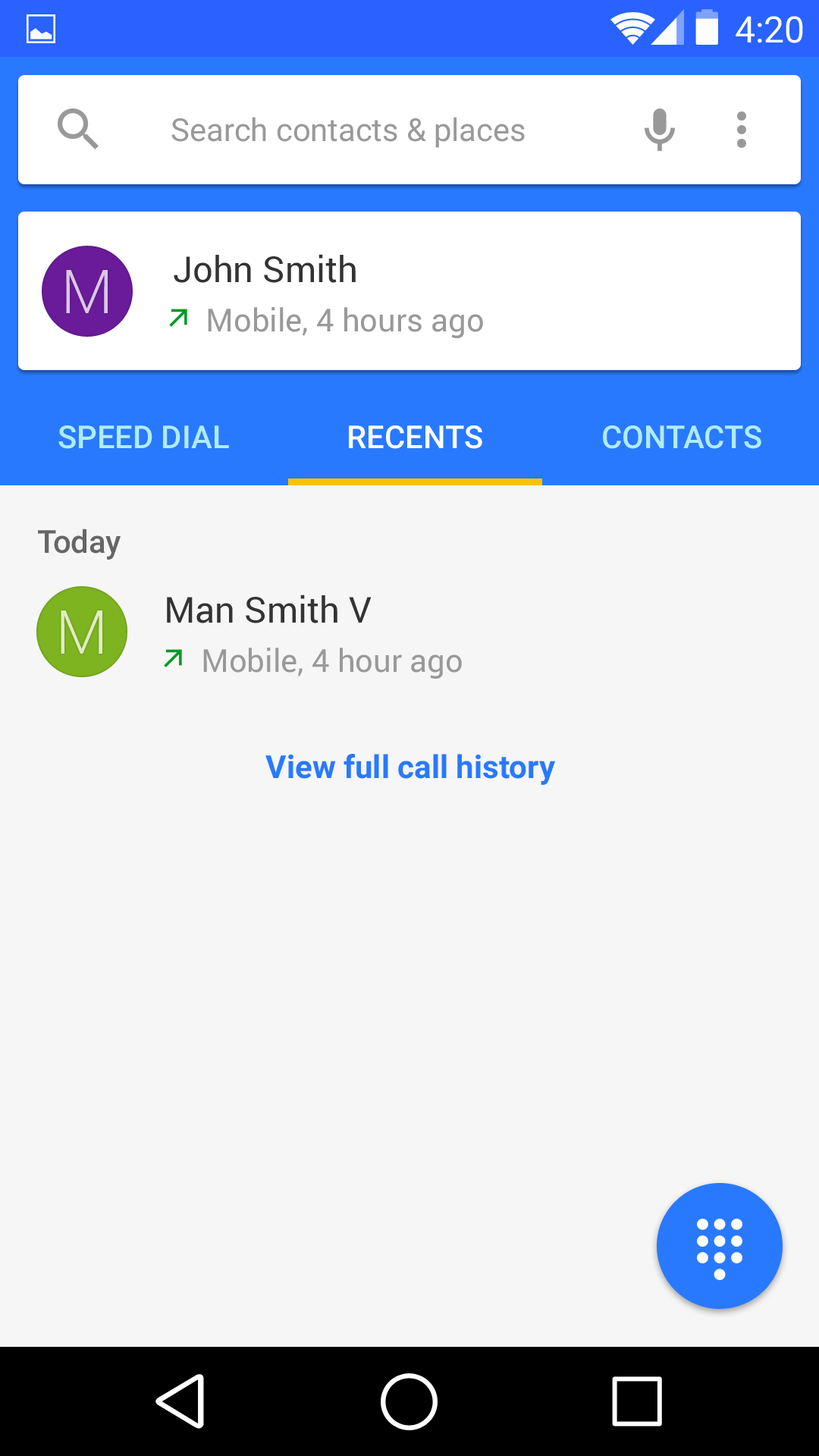
<style>
.page{position:relative;width:819px;height:1456px;background:#f6f6f6}
.page>*{position:absolute;margin:0}
.t1{font:36.4px "Roboto-Regular";color:#ffffff}
.t2{font:31.6px "Roboto-Regular";color:#999999}
.t3{font:35.9px "Roboto-Regular";color:#333333}
.t4{font:60.7px "Roboto-Light";color:#dac6e6}
.t5{font:31.6px "Roboto-Medium";color:#b0ecf7}
.t6{font:31.6px "Roboto-Medium";color:#ffffff}
.t7{font:31.6px "Roboto-Medium";color:#666666}
.t8{font:60.7px "Roboto-Light";color:#dfecc7}
.t9{font:31.8px "Roboto-Bold";color:#2979ff}
</style>
<div class="page">
<p class="t1" style="left:736px;top:16px;width:67px;height:27px">4:20</p>
<p class="t2" style="left:171px;top:117px;width:354px;height:31px">Search contacts &amp; places</p>
<p class="t3" style="left:174px;top:254px;width:182px;height:29px">John Smith</p>
<p class="t4" style="left:66px;top:270px;width:42px;height:43px">M</p>
<p class="t2" style="left:208px;top:307px;width:275px;height:31px">Mobile, 4 hours ago</p>
<p class="t5" style="left:58px;top:425px;width:171px;height:24px">SPEED DIAL</p>
<p class="t6" style="left:349px;top:425px;width:133px;height:24px">RECENTS</p>
<p class="t5" style="left:603px;top:425px;width:158px;height:24px">CONTACTS</p>
<p class="t7" style="left:38px;top:529px;width:83px;height:31px">Today</p>
<p class="t3" style="left:167px;top:595px;width:205px;height:28px">Man Smith V</p>
<p class="t8" style="left:61px;top:610px;width:41px;height:44px">M</p>
<p class="t2" style="left:203px;top:648px;width:259px;height:31px">Mobile, 4 hour ago</p>
<p class="t9" style="left:265px;top:754px;width:290px;height:31px">View full call history</p>
</div>
